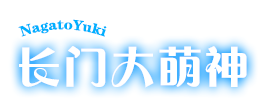
<style>
.page{position:relative;width:265px;height:100px;background:#ffffff}
.page>*{position:absolute;margin:0}
.t1{font:14.3px "FZCHYJW--GB1-0";color:#00b0ff}
.t2{font:46.9px "FZCHYJW--GB1-0";color:#ffffff}
</style>
<div class="page">
<p class="t1" style="left:18px;top:19px;width:89px;height:18px">NagatoYuki</p>
<p class="t2" style="left:19px;top:46px;width:228px;height:42px">长门大萌神</p>
</div>
